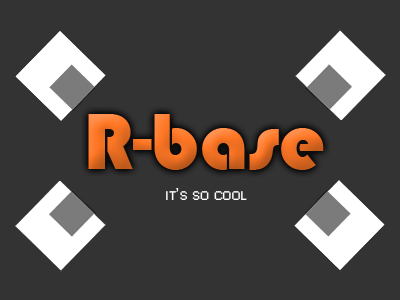
<style>
.page{position:relative;width:400px;height:300px;background:#333333}
.page>*{position:absolute;margin:0}
.t1{font:83.3px "Bauhaus93"}
.t2{font:16.7px "Small Fonts";color:#ffffff;font-variant:small-caps}
</style>
<div class="page">
<p class="t1" style="left:88px;top:114px;width:236px;height:56px">R-base</p>
<p class="t2" style="left:166px;top:188px;width:81px;height:12px">it’s so cool</p>
</div>
